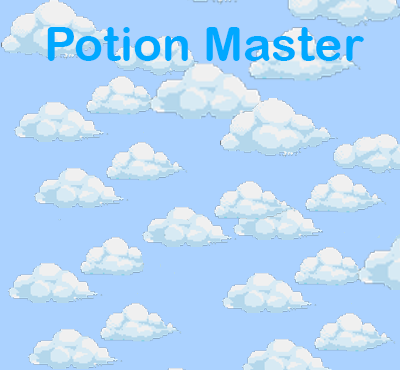
<style>
.page{position:relative;width:400px;height:370px;background:#abd2ff}
.page>*{position:absolute;margin:0}
.t1{font:48px "ArialRoundedMTBold";color:#00a8ff}
</style>
<div class="page">
<p class="t1" style="left:47px;top:27px;width:317px;height:34px">Potion Master</p>
</div>
